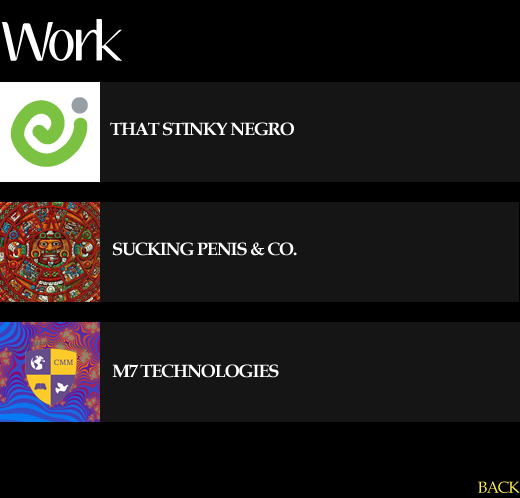
<style>
.page{position:relative;width:520px;height:498px;background:#161515}
.page>*{position:absolute;margin:0}
.t1{font:48px "Aubrey";letter-spacing:-0.06em;color:#ffffff}
.t2{font:18px "BookAntiqua-Bold";letter-spacing:-0.06em;color:#ffffff}
.t3{font:16px "BookAntiqua";letter-spacing:-0.06em;color:#fff449}
</style>
<div class="page">
<p class="t1" style="left:2px;top:19px;width:120px;height:42px">Work</p>
<p class="t2" style="left:110px;top:122px;width:184px;height:14px">THAT STINKY NEGRO</p>
<p class="t2" style="left:112px;top:242px;width:185px;height:14px">SUCKING PENIS &amp; CO.</p>
<p class="t2" style="left:112px;top:364px;width:167px;height:14px">M7 TECHNOLOGIES</p>
<p class="t3" style="left:478px;top:481px;width:42px;height:12px">BACK</p>
</div>
